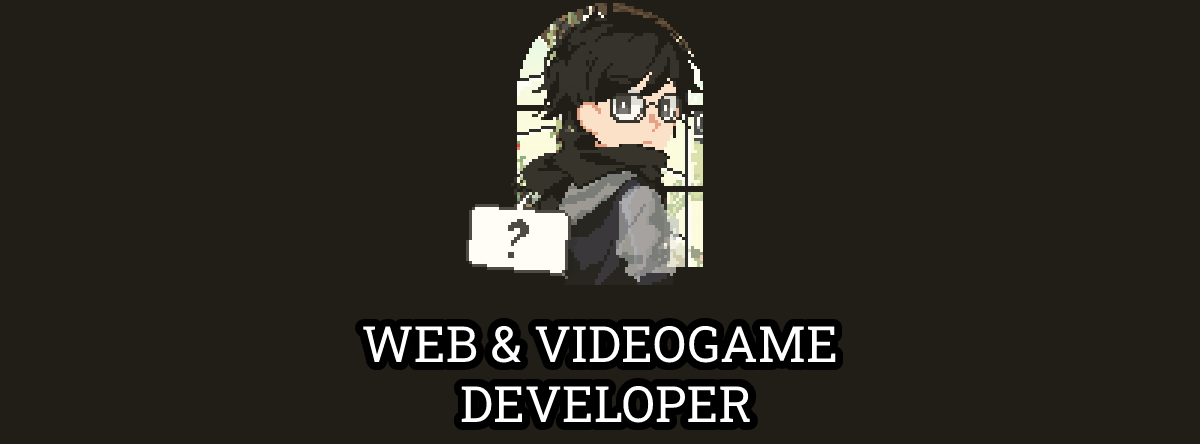
<style>
.page{position:relative;width:1200px;height:444px;background:#211e17}
.page>*{position:absolute;margin:0}
.t1{font:50.1px "RobotoSlab-Regular";color:#ffffff}
</style>
<div class="page">
<p class="t1" style="left:363px;top:325px;width:473px;height:98px;text-align:center">WEB &amp; VIDEOGAME <br>DEVELOPER</p>
</div>
